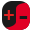
<style>
.page{position:relative;width:32px;height:32px;background:#e00025}
.page>*{position:absolute;margin:0}
.t1{font:20px "Cambria-Bold";letter-spacing:-0.075em;color:#e02121}
.t2{font:32px "Cambria-Bold";letter-spacing:-0.075em;color:#1a1a1a}
</style>
<div class="page">
<p class="t1" style="left:4px;top:10px;width:10px;height:10px">+</p>
<p class="t2" style="left:19px;top:16px;width:9px;height:3px">-</p>
</div>
